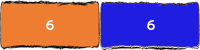
<style>
.page{position:relative;width:200px;height:50px;background:#1f1de0}
.page>*{position:absolute;margin:0}
.t1{font:15px "MyriadHebrew-Regular";color:#ffffff}
</style>
<div class="page">
<p class="t1" style="left:46px;top:20px;width:8px;height:10px">6</p>
<p class="t1" style="left:147px;top:20px;width:8px;height:10px">6</p>
</div>
